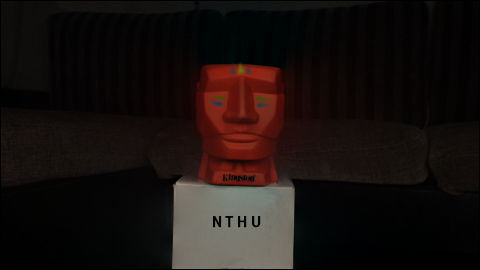
<style>
.page{position:relative;width:480px;height:270px}
.page>*{position:absolute;margin:0}
.t1{font:14px "AdobeFanHeitiStd-Bold";color:#000000;font-weight:bold}
</style>
<div class="page">
<p class="t1" style="left:213px;top:216px;width:48px;height:12px">N T H U</p>
</div>
